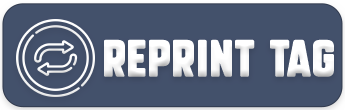
<style>
.page{position:relative;width:345px;height:110px;background:#43516b}
.page>*{position:absolute;margin:0}
.t1{font:36px "SubtleCurves";letter-spacing:0.025em;color:#ffffff}
</style>
<div class="page">
<p class="t1" style="left:104px;top:39px;width:230px;height:38px">Reprint Tag</p>
</div>
